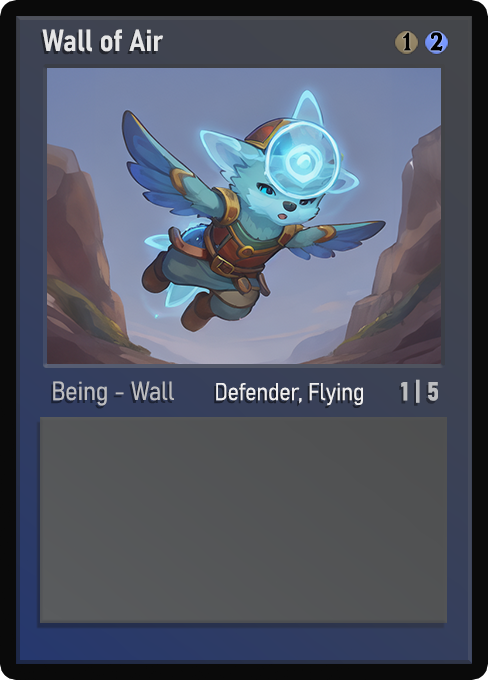
<style>
.page{position:relative;width:488px;height:680px}
.page>*{position:absolute;margin:0}
.t1{font:30px "Bahnschrift-SemiBoldSemiCondensed";color:#f2f2f2;font-weight:bold}
.t2{font:25px "WTRRoycroft";color:#000000;font-weight:bold;scale:1.09 1}
.t3{font:26px "Bahnschrift-LightSemiCondensed";color:#c8c8c8;font-weight:bold}
.t4{font:24px "Bahnschrift-LightSemiCondensed";color:#f0efef;font-weight:bold}
.t5{font:26px "Bahnschrift-BoldSemiCondensed";color:#bcbdc0;font-weight:bold}
</style>
<div class="page">
<p class="t1" style="left:42px;top:29px;width:121px;height:23px;opacity:0.9">Wall of Air</p>
<p class="t2" style="left:403px;top:32px;width:8px;height:19px">1</p>
<p class="t2" style="left:430px;top:32px;width:13px;height:19px">2</p>
<p class="t3" style="left:53px;top:381px;width:121px;height:25px;opacity:0.9">Being - Wall</p>
<p class="t4" style="left:216px;top:383px;width:147px;height:23px">Defender, Flying</p>
<p class="t5" style="left:401px;top:379px;width:37px;height:24px">1 | 5</p>
</div>
